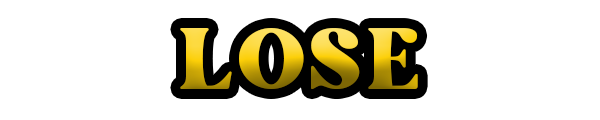
<style>
.page{position:relative;width:600px;height:120px;background:#ffffff}
.page>*{position:absolute;margin:0}
.t1{font:120px "Bright-DEMO";letter-spacing:0.05em}
</style>
<div class="page">
<p class="t1" style="left:180px;top:28px;width:238px;height:62px">LOSE</p>
</div>
